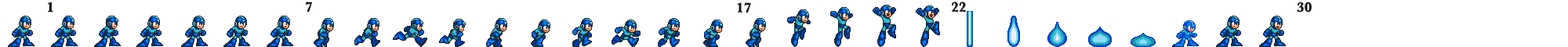
<style>
.page{position:relative;width:1568px;height:47px;background:#ffffff}
.page>*{position:absolute;margin:0}
.t1{font:14.1px "Baskerville-Bold";color:#1c1c1c}
</style>
<div class="page">
<p class="t1" style="left:48px;top:2px;width:5px;height:11px">1</p>
<p class="t1" style="left:305px;top:2px;width:7px;height:11px">7</p>
<p class="t1" style="left:737px;top:2px;width:14px;height:11px">17</p>
<p class="t1" style="left:952px;top:2px;width:14px;height:11px">22</p>
<p class="t1" style="left:1297px;top:2px;width:15px;height:11px">30</p>
</div>
